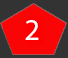
<style>
.page{position:relative;width:68px;height:58px;background:#fa0505}
.page>*{position:absolute;margin:0}
.t1{font:30px "MyriadPro-Regular";color:#ffffff}
</style>
<div class="page">
<p class="t1" style="left:25px;top:20px;width:14px;height:20px">2</p>
</div>
